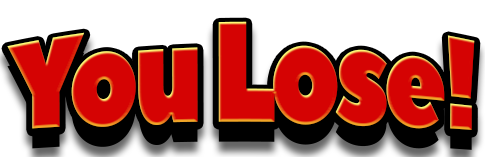
<style>
.page{position:relative;width:485px;height:157px;background:#ffffff}
.page>*{position:absolute;margin:0}
.t1{font:119.8px "PeaceSans";letter-spacing:-0.05em;color:#d50303;scale:0.87 1}
</style>
<div class="page">
<p class="t1" style="left:7px;top:21px;width:468px;height:109px">You Lose!</p>
</div>
